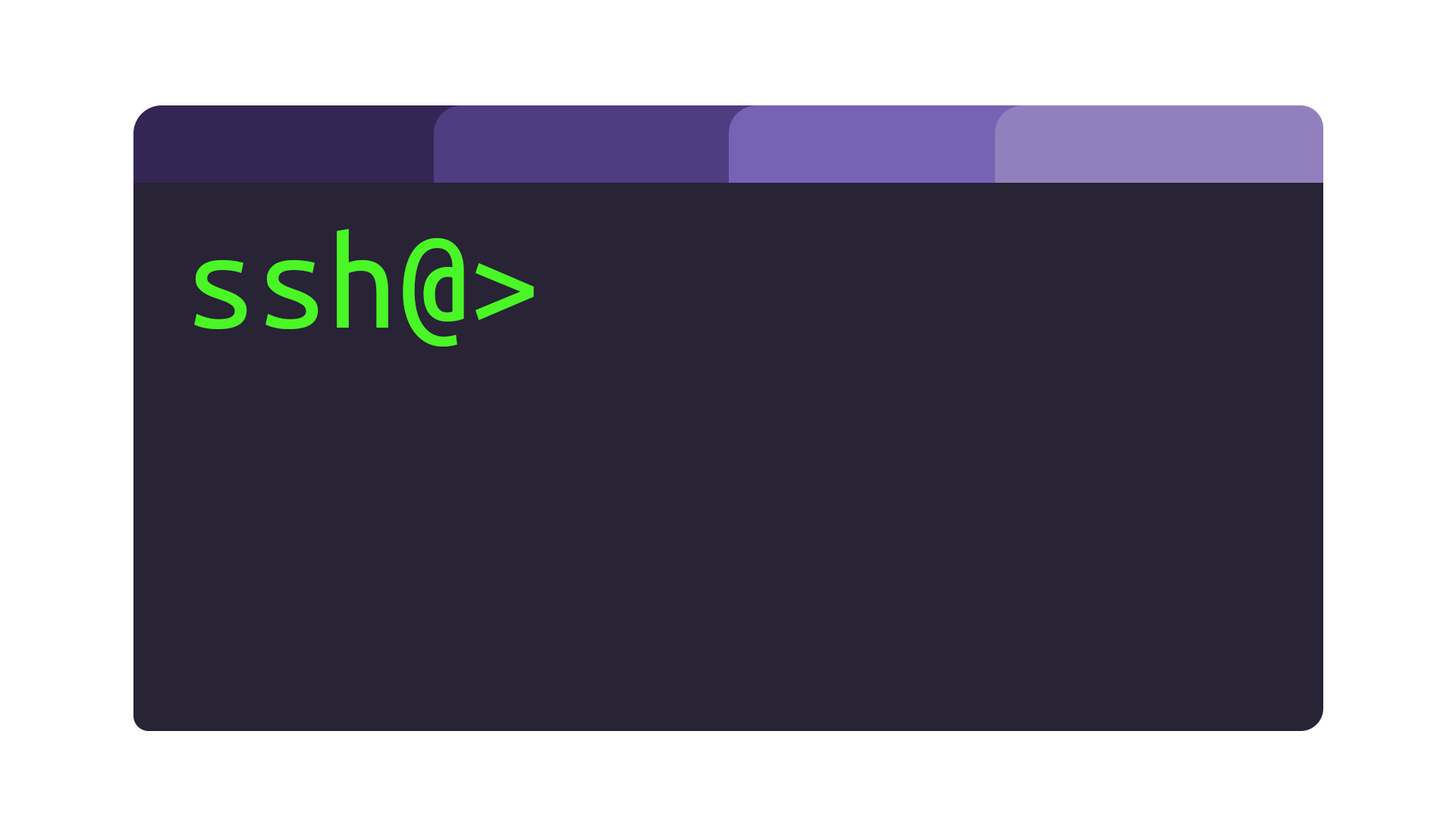
<style>
.page{position:relative;width:1456px;height:819px;background:#282335}
.page>*{position:absolute;margin:0}
.t1{font:141.7px "UbuntuMono-Regular";color:#4af626}
</style>
<div class="page">
<p class="t1" style="left:194px;top:229px;width:340px;height:118px">ssh@&gt;</p>
</div>
